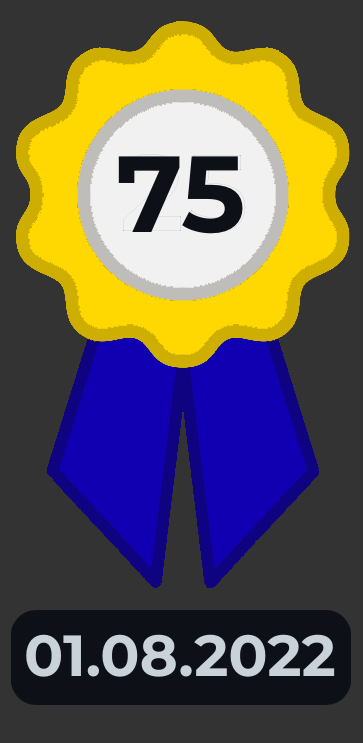
<style>
.page{position:relative;width:363px;height:743px;background:#333333}
.page>*{position:absolute;margin:0}
.t1{font:108px "Montserrat-Bold";color:#0d1117}
.t2{font:58px "Montserrat-Bold";color:#c9d1d9}
</style>
<div class="page">
<p class="t1" style="left:118px;top:156px;width:125px;height:78px">75</p>
<p class="t2" style="left:26px;top:634px;width:309px;height:43px">01.08.2022</p>
</div>
